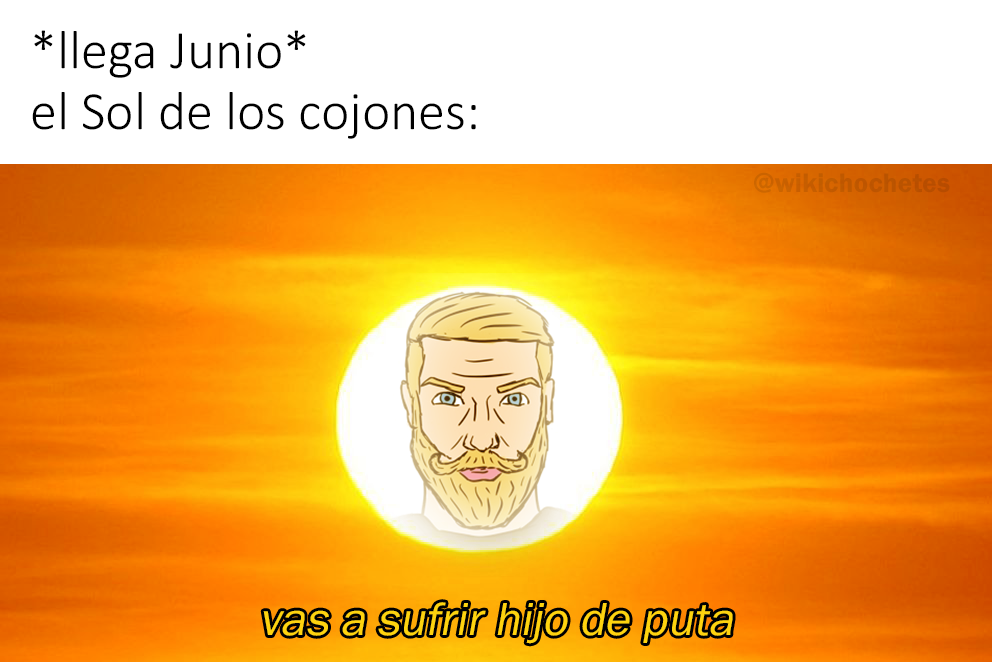
<style>
.page{position:relative;width:992px;height:662px;background:#ffffff}
.page>*{position:absolute;margin:0}
.t1{font:54.2px "Calibri-Light";color:#000000}
.t2{font:27.7px "FranklinGothic-Demi";color:#bf5800}
.t3{font:47.9px "FranklinGothic-Book";color:#fed30f;font-style:italic}
</style>
<div class="page">
<p class="t1" style="left:32px;top:30px;width:444px;height:109px">*llega Junio*<br>el Sol de los cojones:</p>
<p class="t2" style="left:754px;top:172px;width:196px;height:21px">@wikichochetes</p>
<p class="t3" style="left:263px;top:602px;width:470px;height:42px">vas a sufrir hijo de puta</p>
</div>
